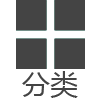
<style>
.page{position:relative;width:100px;height:100px;background:#ffffff}
.page>*{position:absolute;margin:0}
.t1{font:27.8px "MicrosoftYaHei";color:#444444}
</style>
<div class="page">
<p class="t1" style="left:22px;top:71px;width:56px;height:27px">分类</p>
</div>
